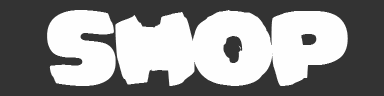
<style>
.page{position:relative;width:384px;height:96px;background:#333333}
.page>*{position:absolute;margin:0}
.t1{font:100px "Bomberman";color:#fefefe}
</style>
<div class="page">
<p class="t1" style="left:47px;top:10px;width:301px;height:76px">Shop</p>
</div>
